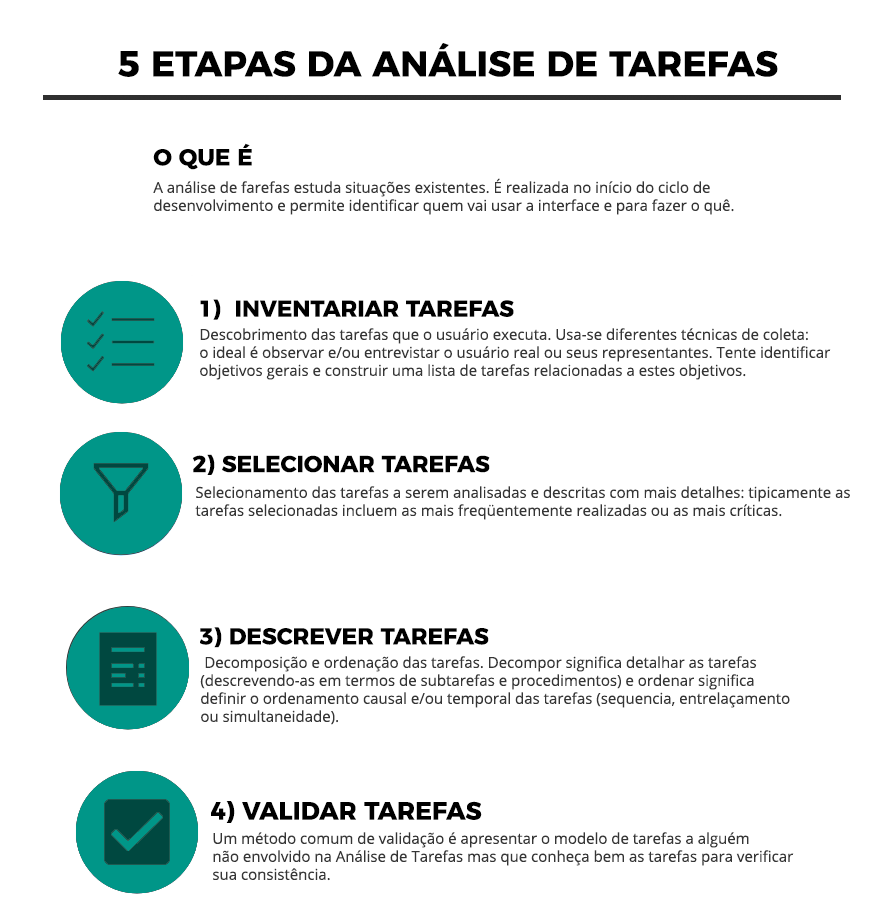
<style>
.page{position:relative;width:880px;height:907px;background:#ffffff}
.page>*{position:absolute;margin:0}
.t1{font:36px "Montserrat-Bold";color:#000000}
.t2{font:23px "Montserrat-Bold";color:#000000}
.t3{font:15px/18px "OpenSans";color:#353535}
.t4{font:25px "Montserrat-Bold";color:#000000}
</style>
<div class="page">
<p class="t1" style="left:118px;top:43px;width:660px;height:34px">5 ETAPAS DA ANÁLISE DE TAREFAS</p>
<p class="t2" style="left:153px;top:143px;width:99px;height:27px">O QUE É</p>
<p class="t3" style="left:153px;top:178px;width:581px;height:37px">A análise de farefas estuda situações existentes. É realizada no início do ciclo de <br>desenvolvimento e permite identificar quem vai usar a interface e para fazer o quê.</p>
<p class="t2" style="left:200px;top:299px;width:314px;height:21px">1)  INVENTARIAR TAREFAS</p>
<p class="t3" style="left:200px;top:328px;width:631px;height:52px">Descobrimento das tarefas que o usuário executa. Usa-se diferentes técnicas de coleta: <br>o ideal é observar e/ou entrevistar o usuário real ou seus representantes. Tente identificar <br>objetivos gerais e construir uma lista de tarefas relacionadas a estes objetivos.</p>
<p class="t2" style="left:192px;top:454px;width:298px;height:21px">2) SELECIONAR TAREFAS</p>
<p class="t3" style="left:195px;top:486px;width:655px;height:34px">Selecionamento das tarefas a serem analisadas e descritas com mais detalhes: tipicamente as <br>tarefas selecionadas incluem as mais freqüentemente realizadas ou as mais críticas.</p>
<p class="t2" style="left:199px;top:627px;width:290px;height:21px">3) DESCREVER TAREFAS</p>
<p class="t3" style="left:200px;top:656px;width:590px;height:69px">Decomposição e ordenação das tarefas. Decompor significa detalhar as tarefas <br>(descrevendo-as em termos de subtarefas e procedimentos) e ordenar significa <br>definir o ordenamento causal e/ou temporal das tarefas (sequencia, entrelaçamento <br>ou simultaneidade).</p>
<p class="t4" style="left:211px;top:801px;width:271px;height:22px">4) VALIDAR TAREFAS</p>
<p class="t3" style="left:213px;top:832px;width:581px;height:49px">Um método comum de validação é apresentar o modelo de tarefas a alguém<br>não envolvido na Análise de Tarefas mas que conheça bem as tarefas para verificar <br>sua consistência.</p>
</div>
